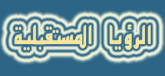
<style>
.page{position:relative;width:165px;height:76px;background:#2d6586}
.page>*{position:absolute;margin:0}
.t1{font:28.4px "AF_Quseem-Normal";letter-spacing:0.05em;color:#f9e497;scale:0.73 1}
</style>
<div class="page">
<p class="t1" style="left:15px;top:25px;width:136px;height:26px">الرؤيا المستقبلية</p>
</div>
